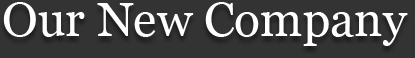
<style>
.page{position:relative;width:415px;height:58px;background:#333333}
.page>*{position:absolute;margin:0}
.t1{font:48px "Georgia";color:#ffffff}
</style>
<div class="page">
<p class="t1" style="left:3px;top:2px;width:405px;height:44px">Our New Company</p>
</div>
